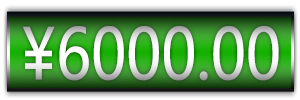
<style>
.page{position:relative;width:300px;height:100px}
.page>*{position:absolute;margin:0}
.t1{font:69.2px "MicrosoftYaHei";scale:0.86 1}
</style>
<div class="page">
<p class="t1" style="left:23px;top:26px;width:256px;height:55px">¥6000.00</p>
</div>
